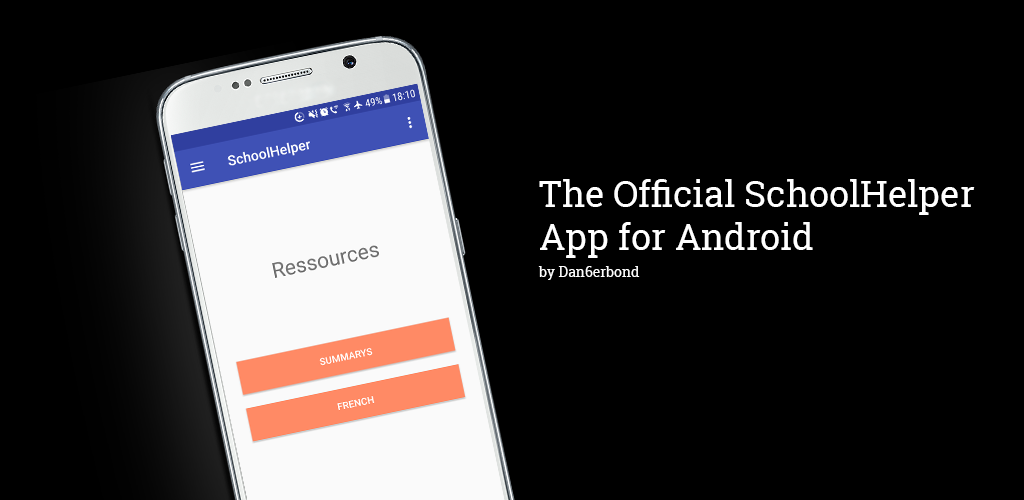
<style>
.page{position:relative;width:1024px;height:500px;background:#000000}
.page>*{position:absolute;margin:0}
.t1{font:36px "RobotoSlab-Regular";color:#ffffff}
.t2{font:14px "RobotoSlab-Regular";color:#ffffff}
</style>
<div class="page">
<p class="t1" style="left:538px;top:179px;width:437px;height:101px">The Official SchoolHelper<br>App for Android<br><br><span class="t2">by Dan6erbond</span></p>
</div>
